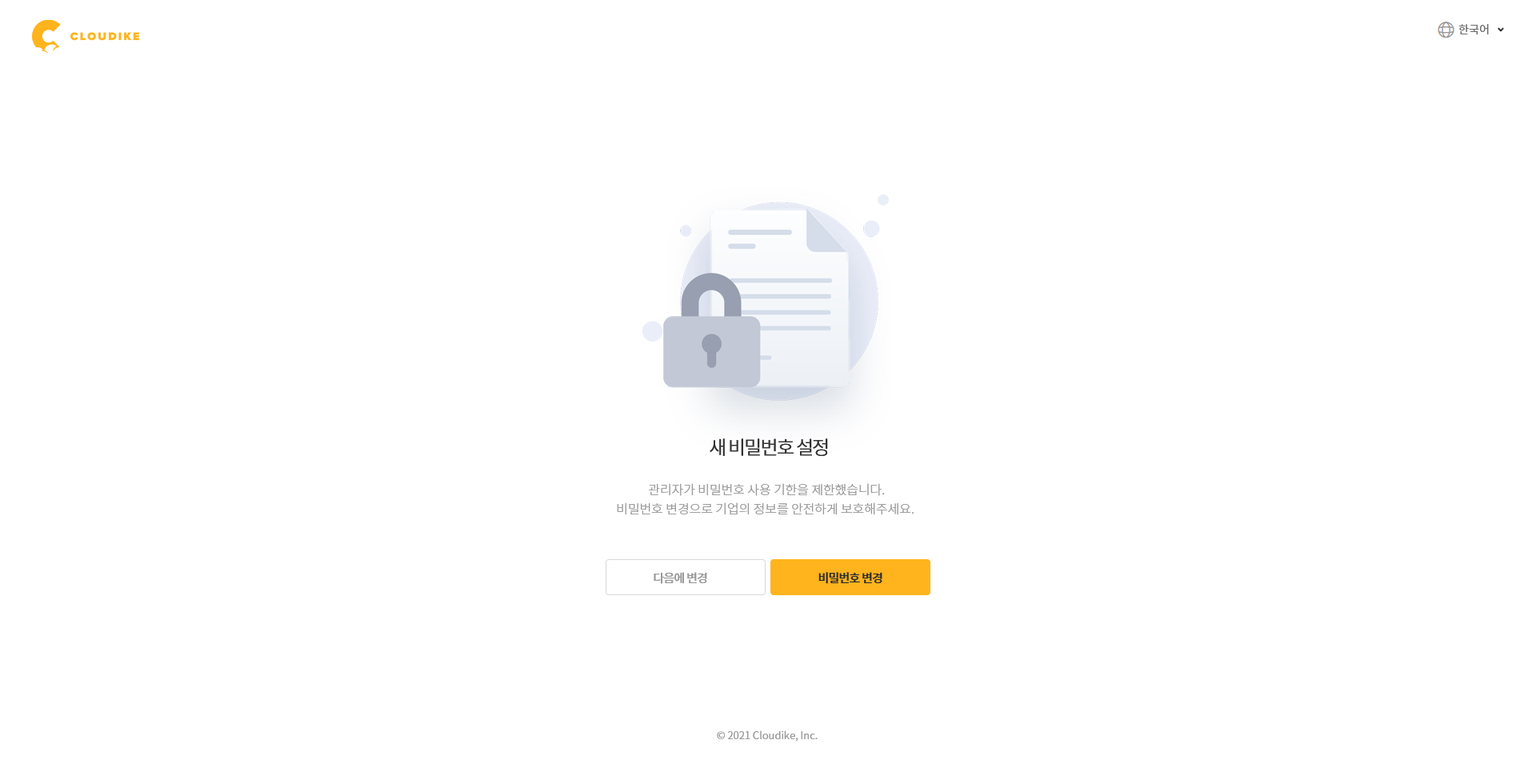
<style>
.page{position:relative;width:1536px;height:776px;background:#ffffff}
.page>*{position:absolute;margin:0}
.t1{font:11.2px "NotoSansCJKkr-DemiLight";color:#666666}
.t2{font:19.2px "NotoSansCJKkr-DemiLight";letter-spacing:-0.075em;color:#333333}
.t3{font:12.8px/19.2px "NotoSansCJKkr-Light";letter-spacing:-0.005em;color:#999999}
.t4{font:12px "NotoSansCJKkr-Medium";letter-spacing:-0.05em;color:#999999}
.t5{font:12px "NotoSansCJKkr-Medium";letter-spacing:-0.05em;color:#2d2d2d}
.t6{font:10.4px "NotoSansCJKkr-DemiLight";color:#999999}
</style>
<div class="page">
<p class="t1" style="left:1459px;top:24px;width:30px;height:11px">한국어</p>
<p class="t2" style="left:710px;top:438px;width:118px;height:18px">새 비밀번호 설정</p>
<p class="t3" style="left:617px;top:483px;width:298px;height:32px;text-align:center">관리자가 비밀번호 사용 기한을 제한했습니다.<br>비밀번호 변경으로 기업의 정보를 안전하게 보호해주세요.</p>
<p class="t4" style="left:654px;top:572px;width:53px;height:12px">다음에 변경</p>
<p class="t5" style="left:819px;top:572px;width:64px;height:12px">비밀번호 변경</p>
<p class="t6" style="left:717px;top:731px;width:101px;height:11px">© 2021 Cloudike, Inc.</p>
</div>
